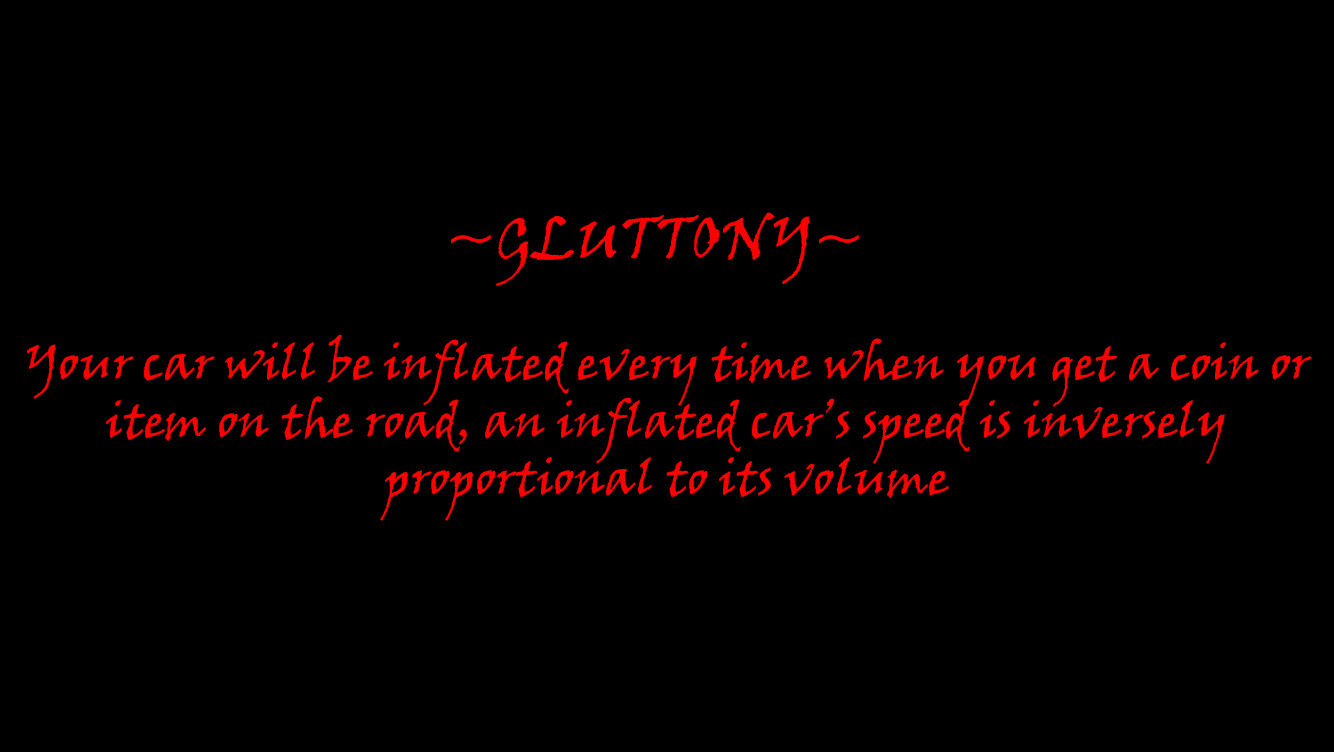
<style>
.page{position:relative;width:1334px;height:752px;background:#000000}
.page>*{position:absolute;margin:0}
.t1{font:60px "VinerHandITC";color:#ff0000}
.t2{font:48px "VinerHandITC";color:#ff0000}
</style>
<div class="page">
<p class="t1" style="left:451px;top:212px;width:408px;height:74px">~GLUTTONY~</p>
<p class="t2" style="left:27px;top:334px;width:1285px;height:187px;text-align:center">Your car will be inflated every time when you get a coin or item on the road, an inflated car’s speed is inversely proportional to its volume</p>
</div>
